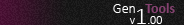
<style>
.page{position:relative;width:184px;height:25px;background:#141414}
.page>*{position:absolute;margin:0}
.t1{font:14px "Calibri-Bold";color:#84416f}
.t2{font:14px "Calibri-Light";color:#ffffff}
.t3{font:12px "Calibri-Light";color:#ffffff}
.t4{font:24px "Calibri-Light";color:#ffffff}
</style>
<div class="page">
<p class="t1" style="left:113px;top:3px;width:62px;height:10px"><span class="t2">Gen   </span>Tools</p>
<p class="t3" style="left:129px;top:9px;width:33px;height:15px">v<span class="t4">1</span>.00</p>
</div>
